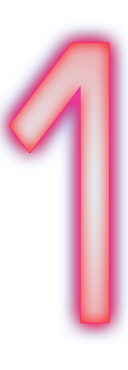
<style>
.page{position:relative;width:128px;height:370px;background:#ffffff}
.page>*{position:absolute;margin:0}
.t1{font:481.8px "EuroCaps";letter-spacing:0.025em;scale:0.76 1}
</style>
<div class="page">
<p class="t1" style="left:9px;top:43px;width:100px;height:280px">1</p>
<p class="t1" style="left:9px;top:43px;width:100px;height:280px">1</p>
</div>
